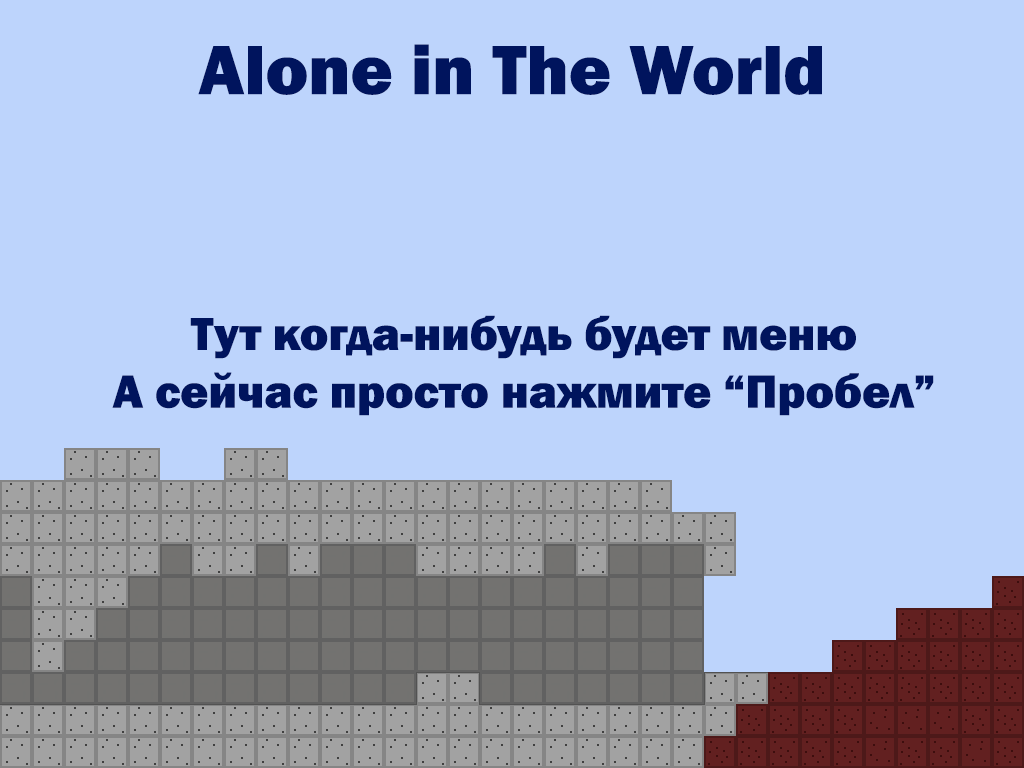
<style>
.page{position:relative;width:1024px;height:768px;background:#bdd4fc}
.page>*{position:absolute;margin:0}
.t1{font:72px "FranklinGothic-Heavy";color:#00145d}
.t2{font:48px "FranklinGothic-Heavy";color:#00145d}
</style>
<div class="page">
<p class="t1" style="left:198px;top:44px;width:624px;height:51px">Alone in The World</p>
<p class="t2" style="left:112px;top:315px;width:822px;height:101px;text-align:center">Тут когда-нибудь будет меню<br>А сейчас просто нажмите “Пробел”</p>
</div>
